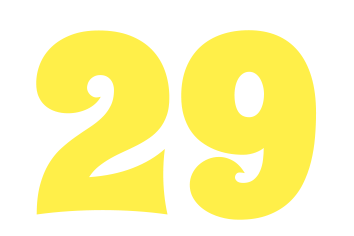
<style>
.page{position:relative;width:354px;height:236px;background:#ffffff}
.page>*{position:absolute;margin:0}
.t1{font:250px "SpicyRice-Regular";color:#ffef49}
</style>
<div class="page">
<p class="t1" style="left:36px;top:30px;width:281px;height:190px">29</p>
</div>
